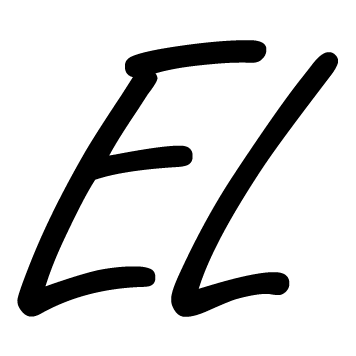
<style>
.page{position:relative;width:356px;height:356px;background:#ffffff}
.page>*{position:absolute;margin:0}
.t1{font:416.7px "FreestyleScript-Regular";color:#000000}
.t2{font:416.7px "CenturyGothic";color:#000000}
</style>
<div class="page">
<p class="t1" style="left:17px;top:40px;width:321px;height:277px"><span class="t2"><br> </span>EL</p>
</div>
